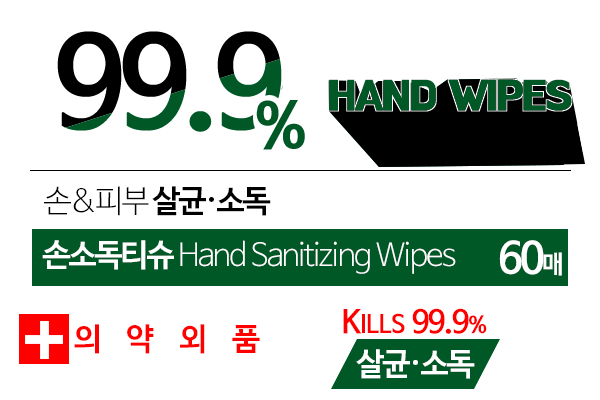
<style>
.page{position:relative;width:600px;height:400px;background:#ffffff}
.page>*{position:absolute;margin:0}
.t1{font:41.8px "BMHANNAPro";letter-spacing:-0.06em;color:#005826;text-transform:uppercase;font-weight:bold}
.t2{font:31.6px "NanumBarunGothicBold";letter-spacing:-0.06em;color:#000000}
.t3{font:31.6px "NanumBarunGothicLight";letter-spacing:-0.06em;color:#000000}
.t4{font:31.6px "NanumBarunGothicLight";letter-spacing:-0.06em;color:#ffffff}
.t5{font:31.6px "NanumBarunGothicBold";letter-spacing:-0.06em;color:#ffffff}
.t6{font:42.9px "NanumBarunGothicBold";letter-spacing:-0.06em;color:#ffffff}
.t7{font:24.8px "NanumBarunGothicBold";letter-spacing:-0.06em;color:#ffffff}
.t8{font:24.8px "NanumBarunGothicBold";letter-spacing:-0.02em;color:#ff0000}
.t9{font:31.6px "NanumBarunGothicBold";letter-spacing:-0.02em;color:#ff0000}
.t10{font:31.6px "NanumBarunGothicBold";letter-spacing:-0.06em;color:#ff0000}
.t11{font:22.6px "NanumBarunGothicBold";letter-spacing:-0.06em;color:#ff0000}
.t12{font:31.6px "NanumBarunGothicBold";letter-spacing:0.8em;color:#ff0000}
</style>
<div class="page">
<p class="t1" style="left:329px;top:79px;width:243px;height:32px">Hand Wipes</p>
<p class="t2" style="left:44px;top:186px;width:227px;height:30px"><span class="t3">손&amp;피부 </span>살균·소독</p>
<p class="t4" style="left:42px;top:240px;width:414px;height:34px"><span class="t5">손소독티슈</span> Hand Sanitizing Wipes</p>
<p class="t6" style="left:499px;top:240px;width:63px;height:36px">60<span class="t7">매</span></p>
<p class="t8" style="left:343px;top:308px;width:144px;height:26px"><span class="t9">K</span>ILLS <span class="t10">99.9</span><span class="t11">%</span></p>
<p class="t12" style="left:74px;top:324px;width:186px;height:30px">의약외품</p>
<p class="t5" style="left:356px;top:349px;width:119px;height:30px">살균·소독</p>
</div>
